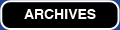
<style>
.page{position:relative;width:120px;height:30px;background:#000000}
.page>*{position:absolute;margin:0}
.t1{font:14px "Helvetica-Bold";color:#ffffff}
</style>
<div class="page">
<p class="t1" style="left:24px;top:9px;width:72px;height:10px">ARCHIVES</p>
</div>
